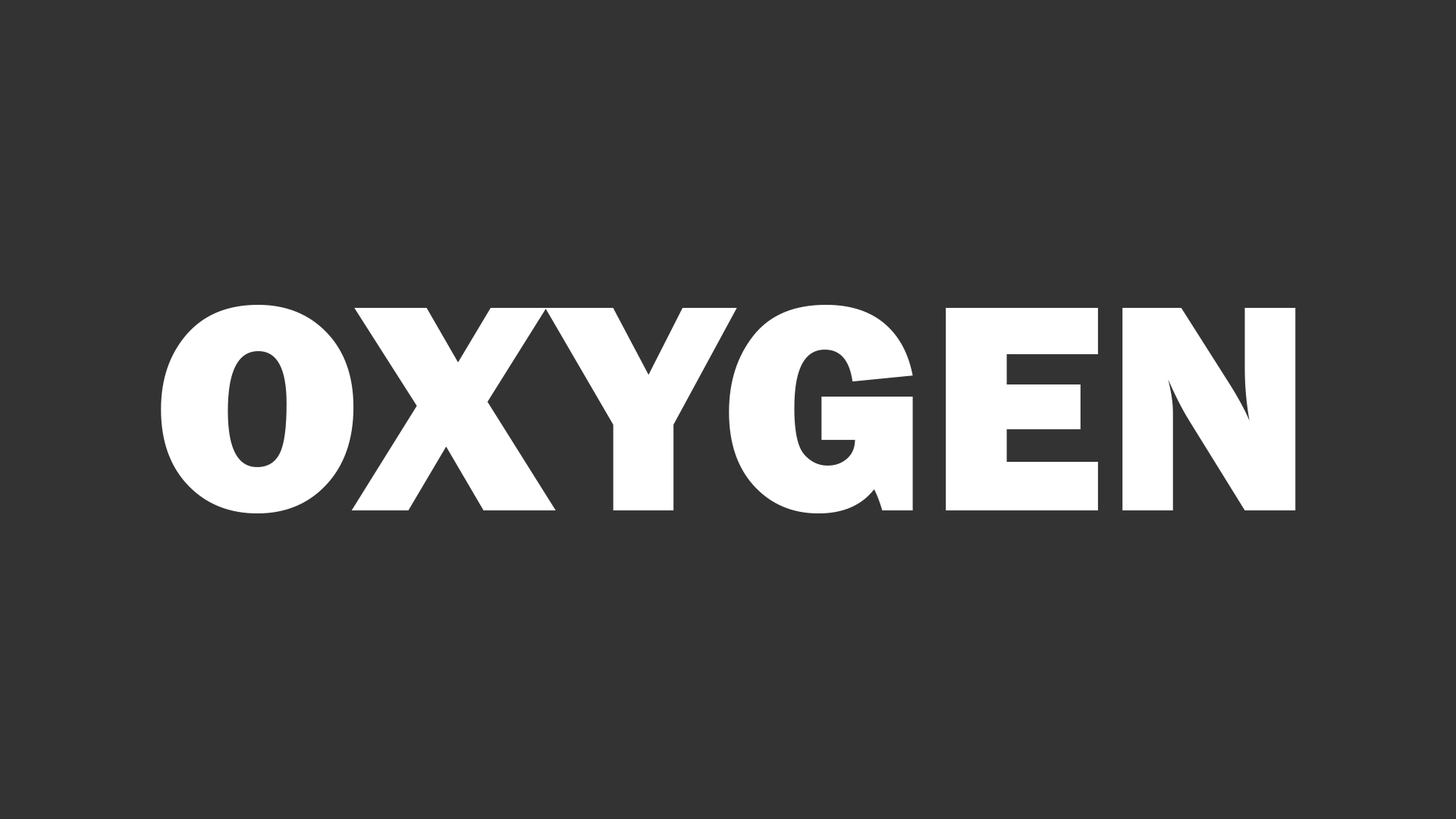
<style>
.page{position:relative;width:1456px;height:819px;background:#333333}
.page>*{position:absolute;margin:0}
.t1{font:303.3px "FranklinGothic-Heavy";color:#ffffff}
</style>
<div class="page">
<p class="t1" style="left:161px;top:305px;width:1135px;height:208px">OXYGEN</p>
</div>
